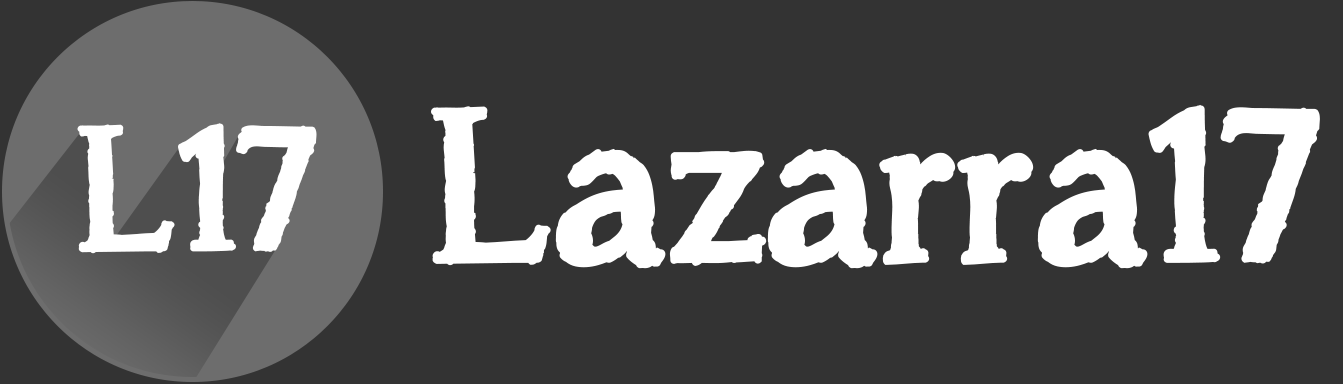
<style>
.page{position:relative;width:1343px;height:384px;background:#333333}
.page>*{position:absolute;margin:0}
.t1{font:210px "asongforjennifer";color:#ffffff;font-weight:bold}
.t2{font:170px "asongforjennifer";color:#ffffff;font-weight:bold}
</style>
<div class="page">
<p class="t1" style="left:431px;top:104px;width:889px;height:165px">Lazarra17</p>
<p class="t2" style="left:77px;top:123px;width:240px;height:131px">L17</p>
</div>
